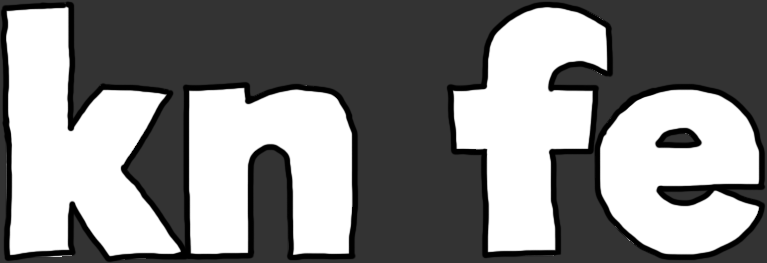
<style>
.page{position:relative;width:767px;height:263px;background:#333333}
.page>*{position:absolute;margin:0}
.t1{font:300px "RifficFree-Bold";color:#ffffff;font-weight:bold}
</style>
<div class="page">
<p class="t1" style="left:6px;top:3px;width:758px;height:257px">kn fe</p>
</div>
